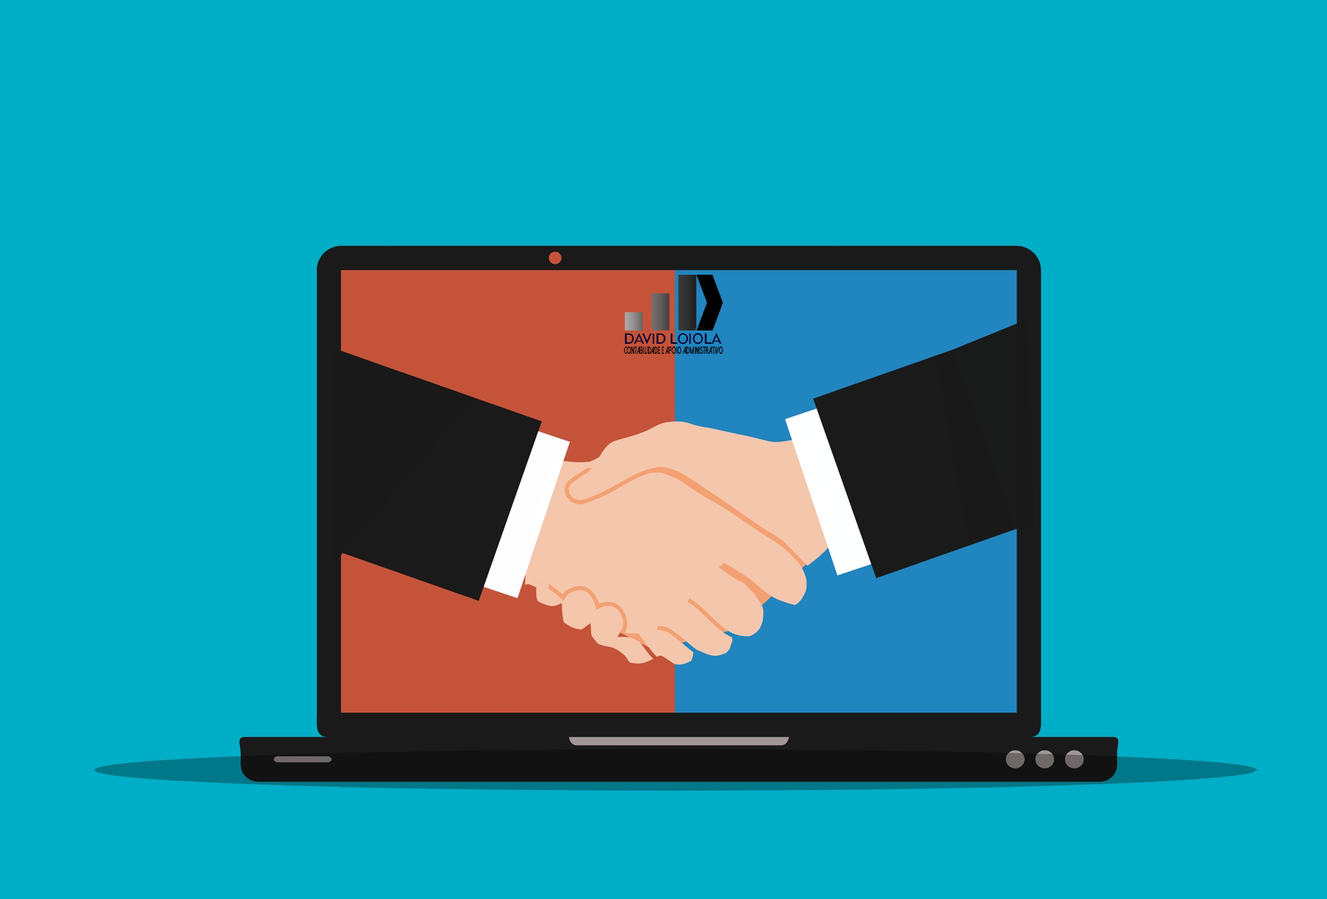
<style>
.page{position:relative;width:1327px;height:899px;background:#00aec7}
.page>*{position:absolute;margin:0}
.t1{font:14.2px "AgenorNeue-Regular";color:#080031;scale:0.94 1}
.t2{font:10.1px "DolceVitaHeavy-Bold";color:#010000;scale:0.54 1}
</style>
<div class="page">
<p class="t1" style="left:625px;top:333px;width:97px;height:11px">DAVID LOIOLA</p>
<p class="t2" style="left:624px;top:346px;width:99px;height:8px">CONTABILIDADE E APOIO ADMINISTRATIVO</p>
</div>
